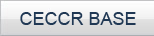
<style>
.page{position:relative;width:154px;height:36px}
.page>*{position:absolute;margin:0}
.t1{font:18px "ArialMT";color:#203854}
</style>
<div class="page">
<p class="t1" style="left:20px;top:12px;width:116px;height:13px">CECCR BASE</p>
</div>
